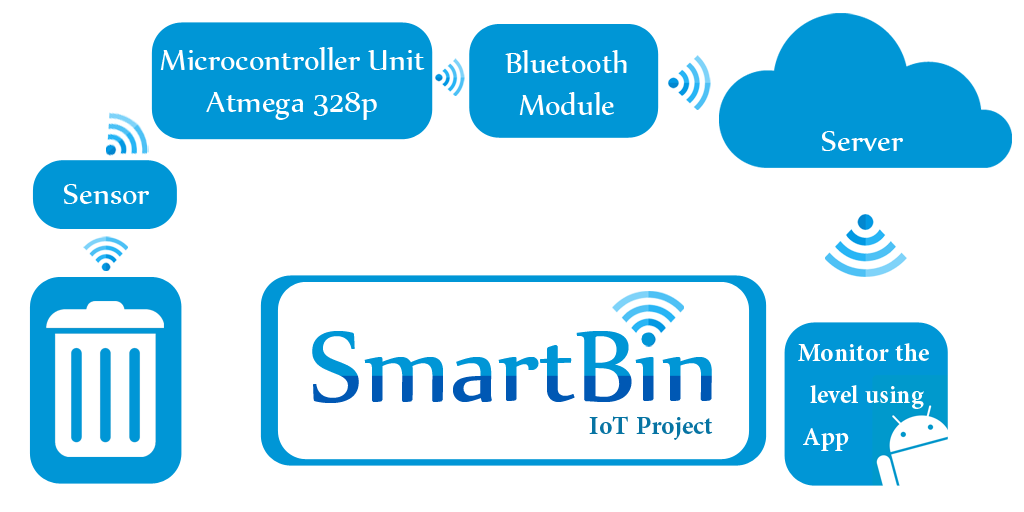
<style>
.page{position:relative;width:1024px;height:512px;background:#ffffff}
.page>*{position:absolute;margin:0}
.t1{font:35px "Nyala-Regular";color:#ffffff}
.t2{font:120px "Nyala-Regular"}
.t3{font:35px "AdobeArabic-Bold";color:#ffffff}
.t4{font:35px "AdobeArabic-Bold";color:#0774a3}
</style>
<div class="page">
<p class="t1" style="left:160px;top:47px;width:265px;height:73px;text-align:center">Microcontroller Unit<br>Atmega 328p</p>
<p class="t1" style="left:505px;top:50px;width:122px;height:65px;text-align:center">Bluetooth<br>Module</p>
<p class="t1" style="left:822px;top:131px;width:81px;height:20px">Server</p>
<p class="t1" style="left:64px;top:184px;width:85px;height:20px">Sensor</p>
<p class="t2" style="left:312px;top:331px;width:400px;height:72px">SmartBin</p>
<p class="t3" style="left:798px;top:343px;width:131px;height:108px;text-align:center">Monitor the <br>level using<br>App</p>
<p class="t4" style="left:589px;top:416px;width:124px;height:24px">IoT Project</p>
</div>
